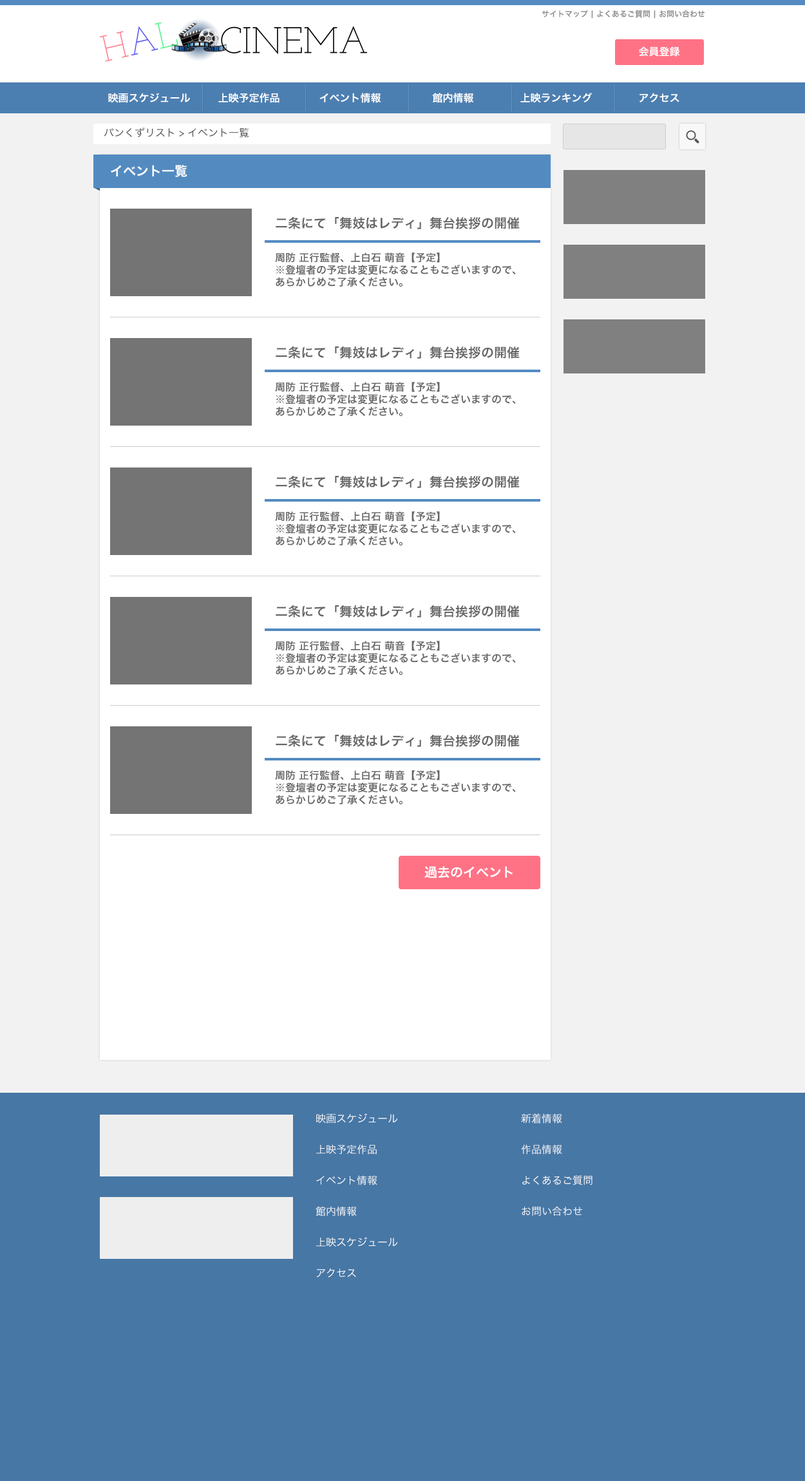
<style>
.page{position:relative;width:805px;height:1481px;background:#ffffff}
.page>*{position:absolute;margin:0}
.t1{font:7.7px "HiraKakuProN-W6";color:#888888}
.t2{font:10.3px "HiraKakuProN-W6";color:#ffffff}
.t3{font:10.3px "HiraKakuProN-W3";color:#333333}
.t4{font:12.9px "HiraKakuProN-W6";color:#ffffff}
.t5{font:12.9px "HiraKakuProN-W6";color:#666666}
.t6{font:10.3px "HiraKakuProN-W6";color:#666666}
.t7{font:10.3px/15.5px "HiraKakuProN-W3";color:#ffffff}
</style>
<div class="page">
<p class="t1" style="left:542px;top:10px;width:163px;height:9px">サイトマップ | よくあるご質問 | お問い合わせ</p>
<p class="t2" style="left:639px;top:46px;width:41px;height:11px">会員登録</p>
<p class="t2" style="left:108px;top:93px;width:82px;height:10px">映画スケジュール</p>
<p class="t2" style="left:218px;top:93px;width:62px;height:10px">上映予定作品</p>
<p class="t2" style="left:319px;top:93px;width:62px;height:10px">イベント情報</p>
<p class="t2" style="left:432px;top:93px;width:42px;height:10px">館内情報</p>
<p class="t2" style="left:520px;top:93px;width:72px;height:10px">上映ランキング</p>
<p class="t2" style="left:640px;top:93px;width:39px;height:9px">アクセス</p>
<p class="t3" style="left:104px;top:128px;width:145px;height:10px">パンくずリスト &gt; イベント一覧</p>
<p class="t4" style="left:111px;top:165px;width:76px;height:12px">イベント一覧</p>
<p class="t5" style="left:276px;top:216px;width:244px;height:13px">二条にて「舞妓はレディ」舞台挨拶の開催決定！！</p>
<p class="t6" style="left:275px;top:252px;width:241px;height:35px">周防 正行監督、上白石 萌音【予定】 <br>※登壇者の予定は変更になることもございますので、あらかじめご了承ください。</p>
<p class="t5" style="left:276px;top:346px;width:244px;height:13px">二条にて「舞妓はレディ」舞台挨拶の開催決定！！</p>
<p class="t6" style="left:275px;top:382px;width:241px;height:35px">周防 正行監督、上白石 萌音【予定】 <br>※登壇者の予定は変更になることもございますので、あらかじめご了承ください。</p>
<p class="t5" style="left:276px;top:475px;width:244px;height:13px">二条にて「舞妓はレディ」舞台挨拶の開催決定！！</p>
<p class="t6" style="left:275px;top:511px;width:241px;height:35px">周防 正行監督、上白石 萌音【予定】 <br>※登壇者の予定は変更になることもございますので、あらかじめご了承ください。</p>
<p class="t5" style="left:276px;top:605px;width:244px;height:13px">二条にて「舞妓はレディ」舞台挨拶の開催決定！！</p>
<p class="t6" style="left:275px;top:641px;width:241px;height:35px">周防 正行監督、上白石 萌音【予定】 <br>※登壇者の予定は変更になることもございますので、あらかじめご了承ください。</p>
<p class="t5" style="left:276px;top:734px;width:244px;height:13px">二条にて「舞妓はレディ」舞台挨拶の開催決定！！</p>
<p class="t6" style="left:275px;top:770px;width:241px;height:35px">周防 正行監督、上白石 萌音【予定】 <br>※登壇者の予定は変更になることもございますので、あらかじめご了承ください。</p>
<p class="t4" style="left:424px;top:866px;width:89px;height:12px">過去のイベント</p>
<p class="t7" style="left:316px;top:1114px;width:82px;height:164px">映画スケジュール<br><br>上映予定作品<br><br>イベント情報<br><br>館内情報<br><br>上映スケジュール<br><br>アクセス</p>
<p class="t7" style="left:521px;top:1114px;width:71px;height:102px">新着情報<br><br>作品情報<br><br>よくあるご質問<br><br>お問い合わせ</p>
</div>
